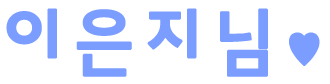
<style>
.page{position:relative;width:330px;height:84px;background:#ffffff}
.page>*{position:absolute;margin:0}
.t1{font:76.1px "SDGothic-Bold";letter-spacing:0.12em;color:#7b9dff;font-weight:bold}
.t2{font:47.2px "SDGothic-Bold";letter-spacing:0.12em;color:#7b9dff;font-weight:bold}
</style>
<div class="page">
<p class="t1" style="left:6px;top:8px;width:314px;height:69px">이은지님<span class="t2">♥</span></p>
</div>
